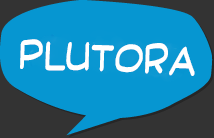
<style>
.page{position:relative;width:214px;height:138px;background:#0696d1}
.page>*{position:absolute;margin:0}
.t1{font:45px "SuplexmentaryComicNC";color:#ffffff;scale:0.8 1}
</style>
<div class="page">
<p class="t1" style="left:20px;top:39px;width:175px;height:37px;rotate:2deg">PLUTORA</p>
</div>
